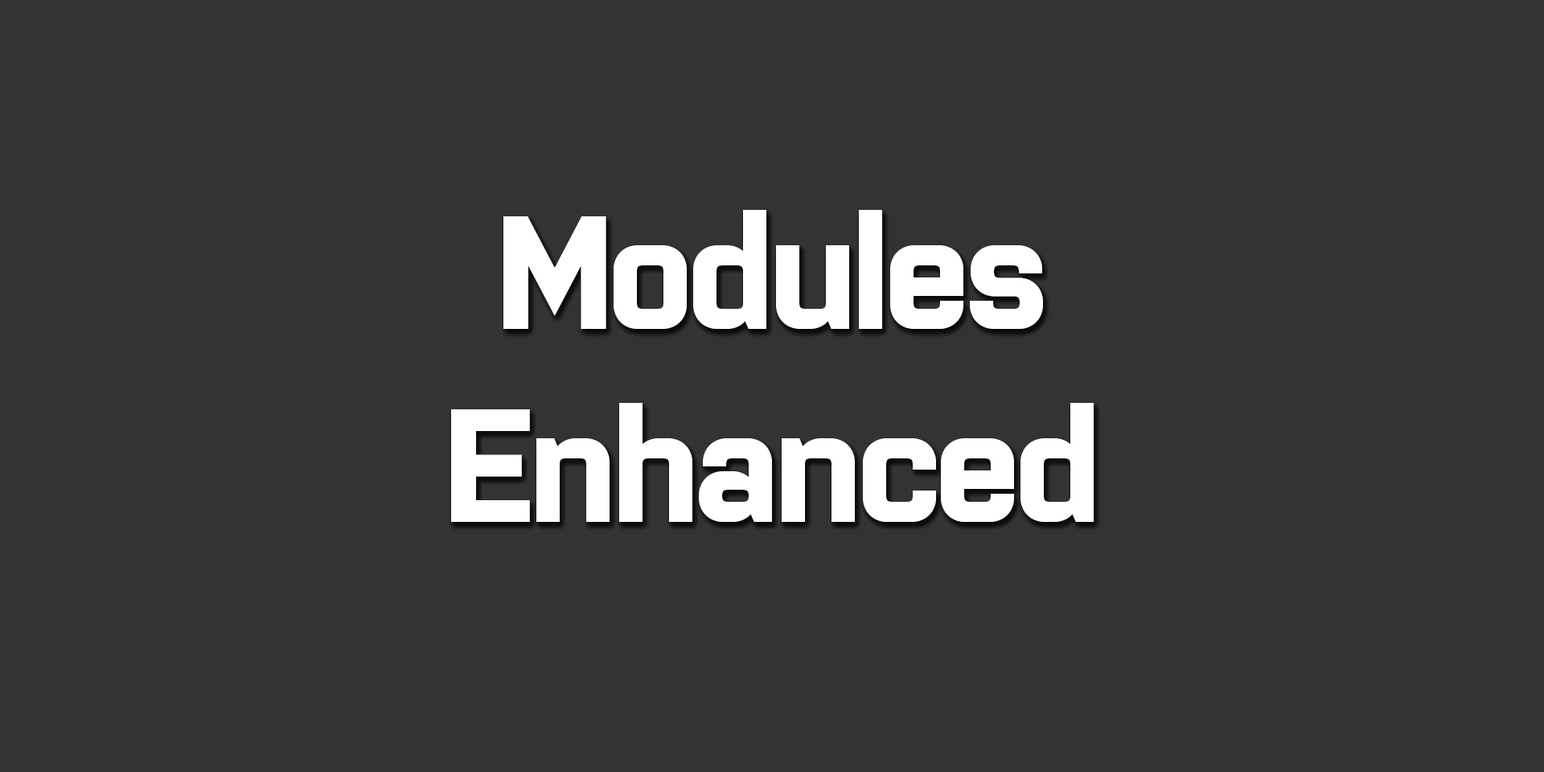
<style>
.page{position:relative;width:1544px;height:772px;background:#333333}
.page>*{position:absolute;margin:0}
.t1{font:160.9px "Purista-Bold";letter-spacing:-0.06em;color:#ffffff}
</style>
<div class="page">
<p class="t1" style="left:451px;top:210px;width:643px;height:312px;text-align:center">Modules<br>Enhanced</p>
</div>
